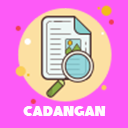
<style>
.page{position:relative;width:128px;height:128px;background:#fd5af7}
.page>*{position:absolute;margin:0}
.t1{font:14px "BerlinSansFB-Bold";color:#fefcfe}
</style>
<div class="page">
<p class="t1" style="left:23px;top:105px;width:83px;height:11px">CADANGAN</p>
</div>
